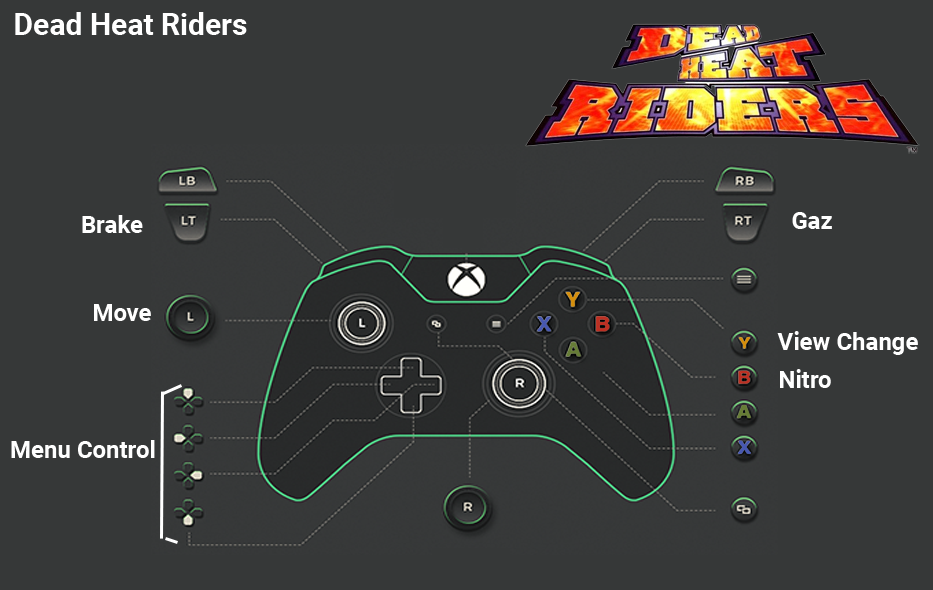
<style>
.page{position:relative;width:933px;height:590px;background:#363838}
.page>*{position:absolute;margin:0}
.t1{font:30px "Roboto-Bold";color:#ffffff}
.t2{font:24px "Roboto-Bold";color:#ffffff}
</style>
<div class="page">
<p class="t1" style="left:15px;top:12px;width:232px;height:23px">Dead Heat Riders</p>
<p class="t2" style="left:82px;top:215px;width:61px;height:18px">Brake</p>
<p class="t2" style="left:792px;top:212px;width:40px;height:17px">Gaz</p>
<p class="t2" style="left:94px;top:304px;width:57px;height:17px">Move</p>
<p class="t2" style="left:777px;top:331px;width:141px;height:24px">View Change</p>
<p class="t2" style="left:780px;top:369px;width:51px;height:19px">Nitro</p>
<p class="t2" style="left:11px;top:440px;width:144px;height:18px">Menu Control</p>
</div>
